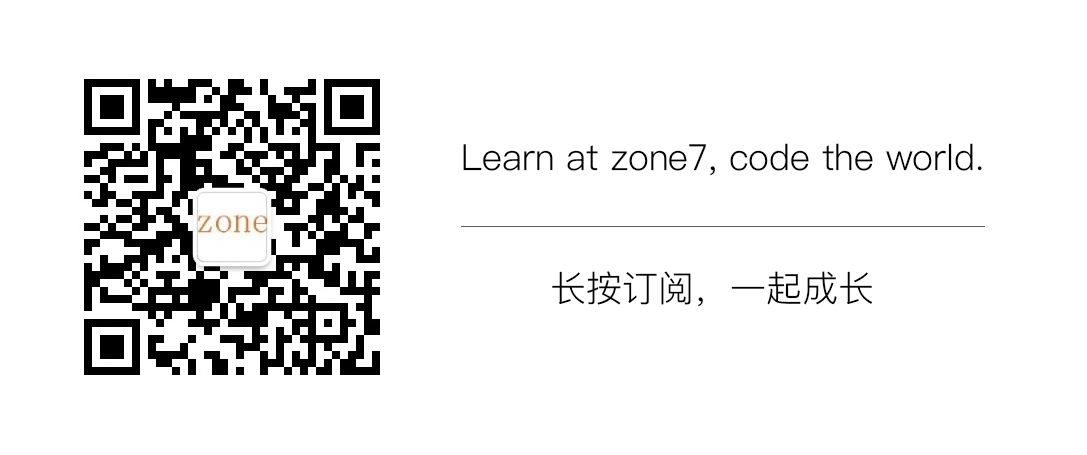
<style>
.page{position:relative;width:1087px;height:455px;background:#ffffff}
.page>*{position:absolute;margin:0}
.t1{font:36px "PingFangSC-Light";color:#000000}
</style>
<div class="page">
<p class="t1" style="left:463px;top:143px;width:519px;height:33px">Learn at zone7, code the world.</p>
<p class="t1" style="left:552px;top:271px;width:321px;height:36px">长按订阅，一起成长</p>
</div>
